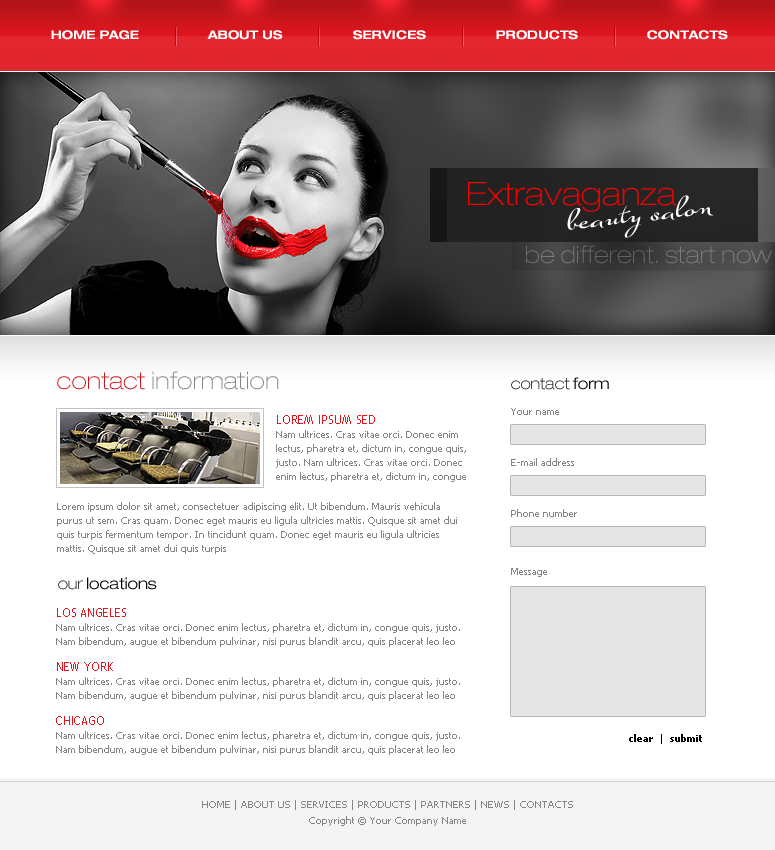
<style>
.page{position:relative;width:775px;height:850px;background:#ffffff}
.page>*{position:absolute;margin:0}
.t1{font:12px "HelveticaNeueLTPro-BdEx";color:#ffffff}
.t2{font:32.2px "HelveticaNeueLTPro-ThEx";color:#f80000}
.t3{font:32.2px "SuaveScriptAlt-Bold";color:#ffffff}
.t4{font:24px "HelveticaNeueLTPro-ThEx";color:#717171}
.t5{font:24px "HelveticaNeueLTPro-ThEx";color:#858585}
.t6{font:24px "HelveticaNeueLTPro-ThEx";color:#cf151c}
.t7{font:16px "HelveticaNeueLTPro-ThEx";color:#000000}
.t8{font:16px "HelveticaNeueLTPro-LtEx";color:#000000}
.t9{font:10px "Tahoma";color:#858585}
.t10{font:10px/14px "Tahoma";color:#858585}
.t11{font:12px/12px "TrebuchetMS";color:#e3151d;text-transform:uppercase}
.t12{font:10px "Tahoma-Bold";color:#000000}
.t13{font:10px "Tahoma";color:#000000}
.t14{font:10px/16px "Tahoma";color:#858585}
</style>
<div class="page">
<p class="t1" style="left:51px;top:30px;width:88px;height:10px">HOME PAGE</p>
<p class="t1" style="left:207px;top:30px;width:76px;height:10px">ABOUT US</p>
<p class="t1" style="left:353px;top:30px;width:73px;height:10px">SERVICES</p>
<p class="t1" style="left:496px;top:30px;width:82px;height:10px">PRODUCTS</p>
<p class="t1" style="left:647px;top:30px;width:81px;height:10px">CONTACTS</p>
<p class="t2" style="left:468px;top:182px;width:209px;height:30px">Extravaganza</p>
<p class="t3" style="left:567px;top:195px;width:147px;height:43px;rotate:-7deg">beauty salon</p>
<p class="t4" style="left:526px;top:245px;width:246px;height:19px">be different. start now</p>
<p class="t5" style="left:57px;top:371px;width:222px;height:19px"><span class="t6">contact </span>information</p>
<p class="t7" style="left:511px;top:377px;width:98px;height:13px">contact <span class="t8">form</span></p>
<p class="t9" style="left:511px;top:408px;width:48px;height:7px">Your name</p>
<p class="t10" style="left:276px;top:415px;width:190px;height:67px"><span class="t11">LOREM IPSUM sed <br></span>Nam ultrices. Cras vitae orci. Donec enim lectus, pharetra et, dictum in, congue quis, justo. Nam ultrices. Cras vitae orci. Donec enim lectus, pharetra et, dictum in, congue</p>
<p class="t9" style="left:511px;top:458px;width:63px;height:8px">E-mail address</p>
<p class="t10" style="left:57px;top:502px;width:400px;height:52px">Lorem ipsum dolor sit amet, consectetuer adipiscing elit. Ut bibendum. Mauris vehicula purus ut sem. Cras quam. Donec eget mauris eu ligula ultricies mattis. Quisque sit amet dui quis turpis fermentum tempor. In tincidunt quam. Donec eget mauris eu ligula ultricies mattis. Quisque sit amet dui quis turpis</p>
<p class="t9" style="left:511px;top:509px;width:66px;height:8px">Phone number</p>
<p class="t9" style="left:511px;top:568px;width:36px;height:9px">Message</p>
<p class="t8" style="left:58px;top:577px;width:99px;height:13px"><span class="t7">our </span>locations</p>
<p class="t10" style="left:56px;top:608px;width:404px;height:147px"><span class="t11">Los angeles<br></span>Nam ultrices. Cras vitae orci. Donec enim lectus, pharetra et, dictum in, congue quis, justo. Nam bibendum, augue et bibendum pulvinar, nisi purus blandit arcu, quis placerat leo leo <br><br><span class="t11">NEW YORK<br></span>Nam ultrices. Cras vitae orci. Donec enim lectus, pharetra et, dictum in, congue quis, justo. Nam bibendum, augue et bibendum pulvinar, nisi purus blandit arcu, quis placerat leo leo <br><br><span class="t11">CHICAGO<br></span>Nam ultrices. Cras vitae orci. Donec enim lectus, pharetra et, dictum in, congue quis, justo. Nam bibendum, augue et bibendum pulvinar, nisi purus blandit arcu, quis placerat leo leo</p>
<p class="t12" style="left:629px;top:734px;width:73px;height:10px">clear  <span class="t13">| </span> submit</p>
<p class="t14" style="left:202px;top:800px;width:371px;height:26px;text-align:center">HOME | ABOUT US | SERVICES | PRODUCTS | PARTNERS | NEWS | CONTACTS<br>Copyright © Your Company Name</p>
</div>
